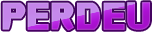
<style>
.page{position:relative;width:154px;height:32px}
.page>*{position:absolute;margin:0}
.t1{font:33.3px "KurokaneStd-EB";letter-spacing:-0.022em;font-weight:bold}
</style>
<div class="page">
<p class="t1" style="left:2px;top:2px;width:148px;height:29px">PERDEU</p>
</div>
